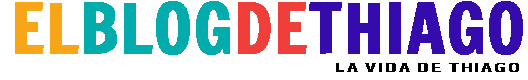
<style>
.page{position:relative;width:528px;height:80px;background:#ffffff}
.page>*{position:absolute;margin:0}
.t1{font:67.8px "FrancoisOne-Regular";color:#350bae;font-weight:bold}
.t2{font:67.8px "FrancoisOne-Regular";color:#f7a617;font-weight:bold}
.t3{font:67.8px "FrancoisOne-Regular";color:#02acac;font-weight:bold}
.t4{font:67.8px "FrancoisOne-Regular";color:#f03e3a;font-weight:bold}
.t5{font:14.8px "Play-Bold";letter-spacing:0.12em;color:#000000;font-weight:bold}
</style>
<div class="page">
<p class="t1" style="left:15px;top:1px;width:508px;height:54px"><span class="t2">EL</span><span class="t3">BLOG</span><span class="t4">DE</span>THIAGO</p>
<p class="t5" style="left:336px;top:63px;width:183px;height:9px">LA VIDA DE THIAGO</p>
</div>
